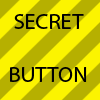
<style>
.page{position:relative;width:100px;height:100px;background:#fcf400}
.page>*{position:absolute;margin:0}
.t1{font:22.4px "MyriadPro-Regular";color:#000000}
</style>
<div class="page">
<p class="t1" style="left:10px;top:14px;width:77px;height:68px;text-align:center">SECRET<br><br>BUTTON</p>
</div>
